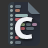
<style>
.page{position:relative;width:48px;height:48px;background:#333333}
.page>*{position:absolute;margin:0}
.t1{font:32.5px "MyriadPro-Bold";color:#eff1f5}
</style>
<div class="page">
<p class="t1" style="left:15px;top:17px;width:18px;height:22px">C</p>
</div>
